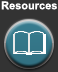
<style>
.page{position:relative;width:58px;height:72px;background:#333333}
.page>*{position:absolute;margin:0}
.t1{font:11px "Arial-BoldMT";color:#ffffff}
</style>
<div class="page">
<p class="t1" style="left:1px;top:1px;width:56px;height:9px">Resources</p>
</div>
